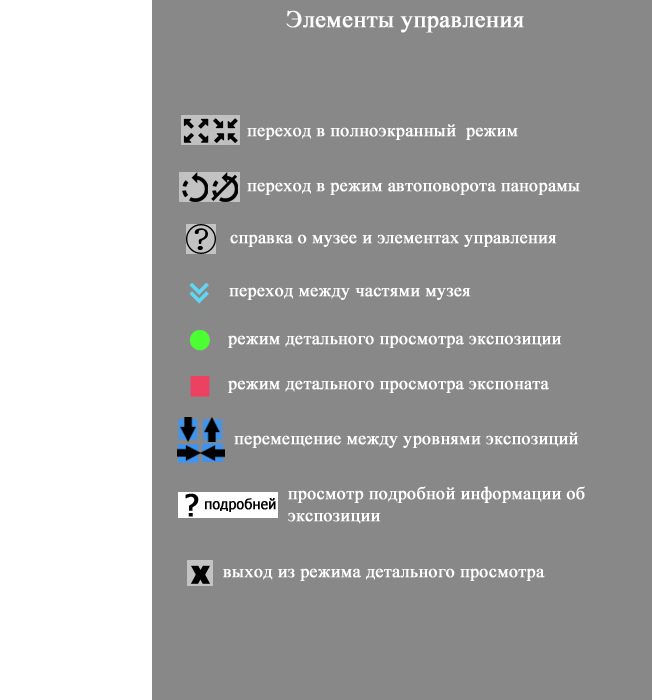
<style>
.page{position:relative;width:652px;height:700px;background:#888888}
.page>*{position:absolute;margin:0}
.t1{font:24px "TimesNewRomanPSMT";letter-spacing:-0.005em;color:#ffffff;font-weight:bold}
.t2{font:18px "TimesNewRomanPSMT";letter-spacing:-0.005em;color:#ffffff;font-weight:bold}
</style>
<div class="page">
<p class="t1" style="left:286px;top:10px;width:238px;height:23px">Элементы управления</p>
<p class="t2" style="left:247px;top:124px;width:271px;height:16px">переход в полноэкранный  режим</p>
<p class="t2" style="left:247px;top:182px;width:333px;height:13px">переход в режим автоповорота панорамы</p>
<p class="t2" style="left:230px;top:234px;width:327px;height:13px">справка о музее и элементах управления</p>
<p class="t2" style="left:229px;top:287px;width:242px;height:13px">переход между частями музея</p>
<p class="t2" style="left:228px;top:335px;width:334px;height:13px">режим детального просмотра экспозиции</p>
<p class="t2" style="left:228px;top:380px;width:321px;height:13px">режим детального просмотра экспоната</p>
<p class="t2" style="left:234px;top:432px;width:345px;height:16px">перемещение между уровнями экспозиций</p>
<p class="t2" style="left:288px;top:486px;width:297px;height:38px">просмотр подробной информации об <br>экспозиции</p>
<p class="t2" style="left:223px;top:568px;width:322px;height:13px">выход из режима детального просмотра</p>
</div>
